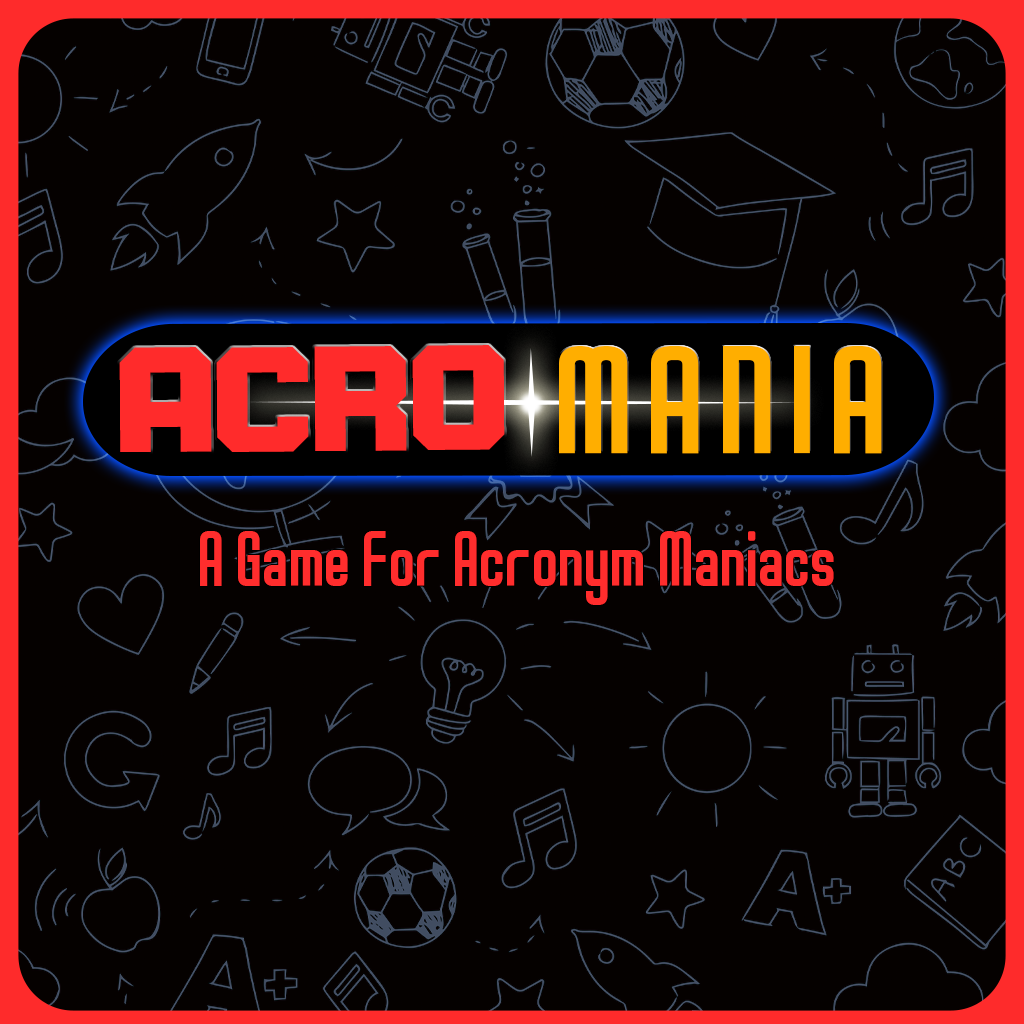
<style>
.page{position:relative;width:1024px;height:1024px;background:#050100}
.page>*{position:absolute;margin:0}
.t1{font:158.8px "D3-Egoistism";color:#ff2b2b;scale:0.54 1}
.t2{font:119.1px "D3-Smartism-TypeA";letter-spacing:0.1em;color:#ffae00;scale:1.13 1}
.t3{font:61px "D3-Smartism-TypeA";color:#ff2d2d}
</style>
<div class="page">
<p class="t1" style="left:119px;top:345px;width:386px;height:107px">ACRO</p>
<p class="t2" style="left:559px;top:345px;width:323px;height:109px">MANIA</p>
<p class="t3" style="left:200px;top:531px;width:634px;height:74px">A Game For Acronym Maniacs</p>
</div>
